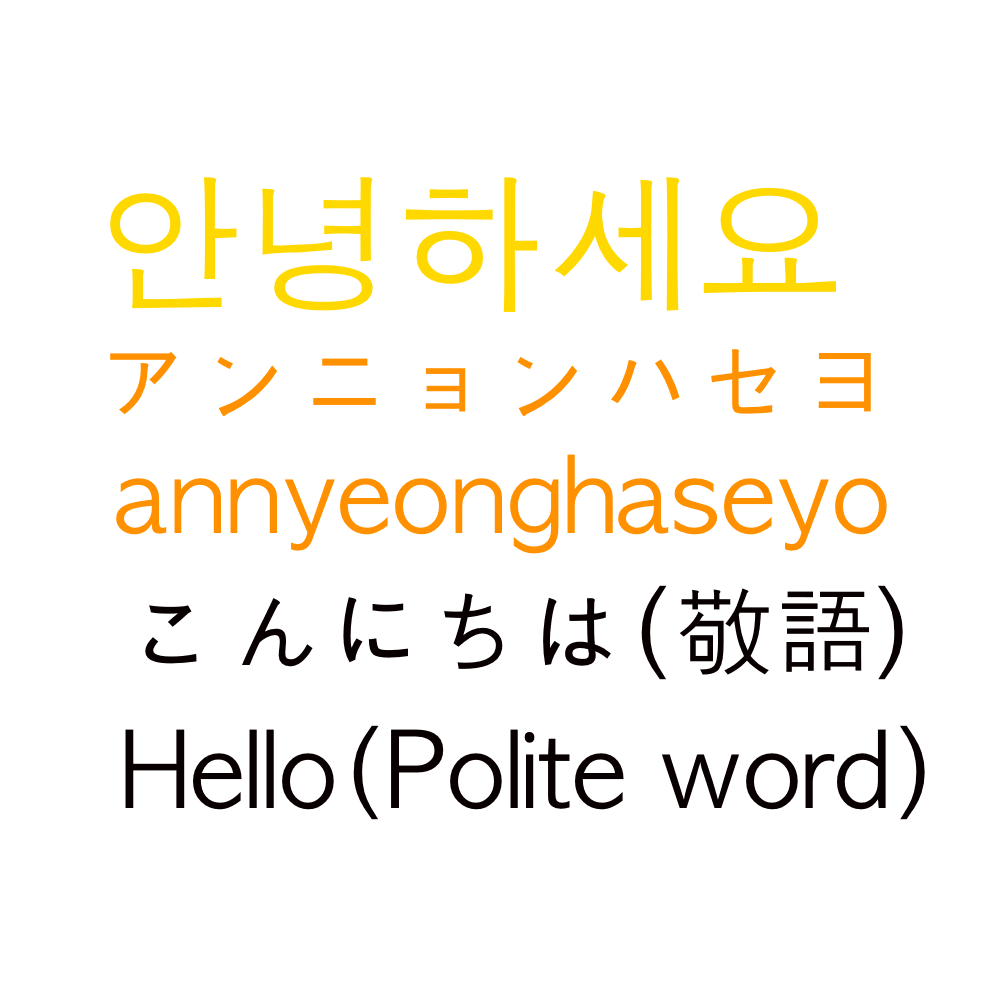
<style>
.page{position:relative;width:1000px;height:1000px;background:#ffffff}
.page>*{position:absolute;margin:0}
.t1{font:100px "AppleGothic";color:#ff9000}
.t2{font:150px "AppleGothic";color:#ffd800}
.t3{font:100px "AppleGothic";color:#080000}
</style>
<div class="page">
<p class="t1" style="left:110px;top:177px;width:761px;height:240px"><span class="t2">안녕하세요<br></span>アンニョンハセヨ</p>
<p class="t1" style="left:116px;top:454px;width:771px;height:100px">annyeonghaseyo</p>
<p class="t3" style="left:145px;top:585px;width:758px;height:95px">こんにちは(敬語）</p>
<p class="t3" style="left:125px;top:725px;width:800px;height:95px">Hello(Polite word)</p>
</div>
